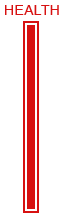
<style>
.page{position:relative;width:65px;height:219px;background:#ffffff}
.page>*{position:absolute;margin:0}
.t1{font:14px "ArialMT";letter-spacing:0.025em;color:#d71111}
</style>
<div class="page">
<p class="t1" style="left:5px;top:5px;width:54px;height:10px">HEALTH</p>
</div>
